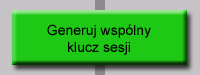
<style>
.page{position:relative;width:200px;height:75px;background:#1ec915}
.page>*{position:absolute;margin:0}
.t1{font:14px "ArialMT";color:#000000}
</style>
<div class="page">
<p class="t1" style="left:47px;top:24px;width:104px;height:31px;text-align:center">Generuj wspólny<br>klucz sesji</p>
</div>
